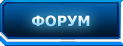
<style>
.page{position:relative;width:123px;height:46px}
.page>*{position:absolute;margin:0}
.t1{font:14px "Verdana-Bold"}
</style>
<div class="page">
<p class="t1" style="left:32px;top:15px;width:58px;height:12px">ФОРУМ</p>
</div>
